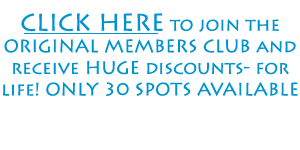
<style>
.page{position:relative;width:300px;height:150px;background:#ffffff}
.page>*{position:absolute;margin:0}
.t1{font:18px "LithosPro-Regular";color:#0093d0}
.t2{font:24px "LithosPro-Regular";color:#0093d0}
</style>
<div class="page">
<p class="t1" style="left:3px;top:13px;width:295px;height:84px;text-align:center"><span class="t2">CLICK HERE</span> to join the ORIGINAL MEMBERS CLUB and receive HUGE discounts- for life! ONLY 30 SPOTS AVAILABLE</p>
</div>
